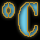
<style>
.page{position:relative;width:40px;height:40px;background:#000000}
.page>*{position:absolute;margin:0}
.t1{font:47.7px "Stencil";scale:0.73 1}
</style>
<div class="page">
<p class="t1" style="left:3px;top:3px;width:34px;height:33px">°C</p>
</div>
